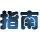
<style>
.page{position:relative;width:40px;height:40px;background:#ffffff}
.page>*{position:absolute;margin:0}
.t1{font:20px "STHupo";letter-spacing:0.005em}
</style>
<div class="page">
<p class="t1" style="left:0px;top:10px;width:39px;height:20px">指南</p>
</div>
